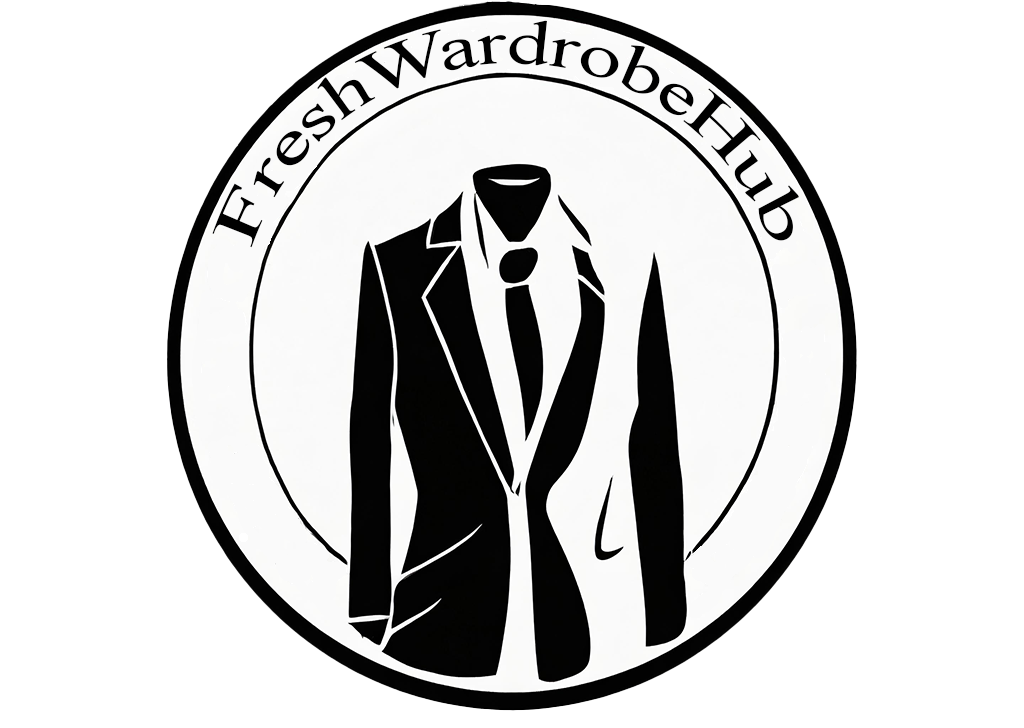
<style>
.page{position:relative;width:1024px;height:728px;background:#ffffff}
.page>*{position:absolute;margin:0}
.t1{font:61.7px "TimesNewRomanPSMT";color:#000000}
</style>
<div class="page">
<p class="t1" style="left:212px;top:20px;width:587px;height:228px">FreshWardrobeHub</p>
</div>
